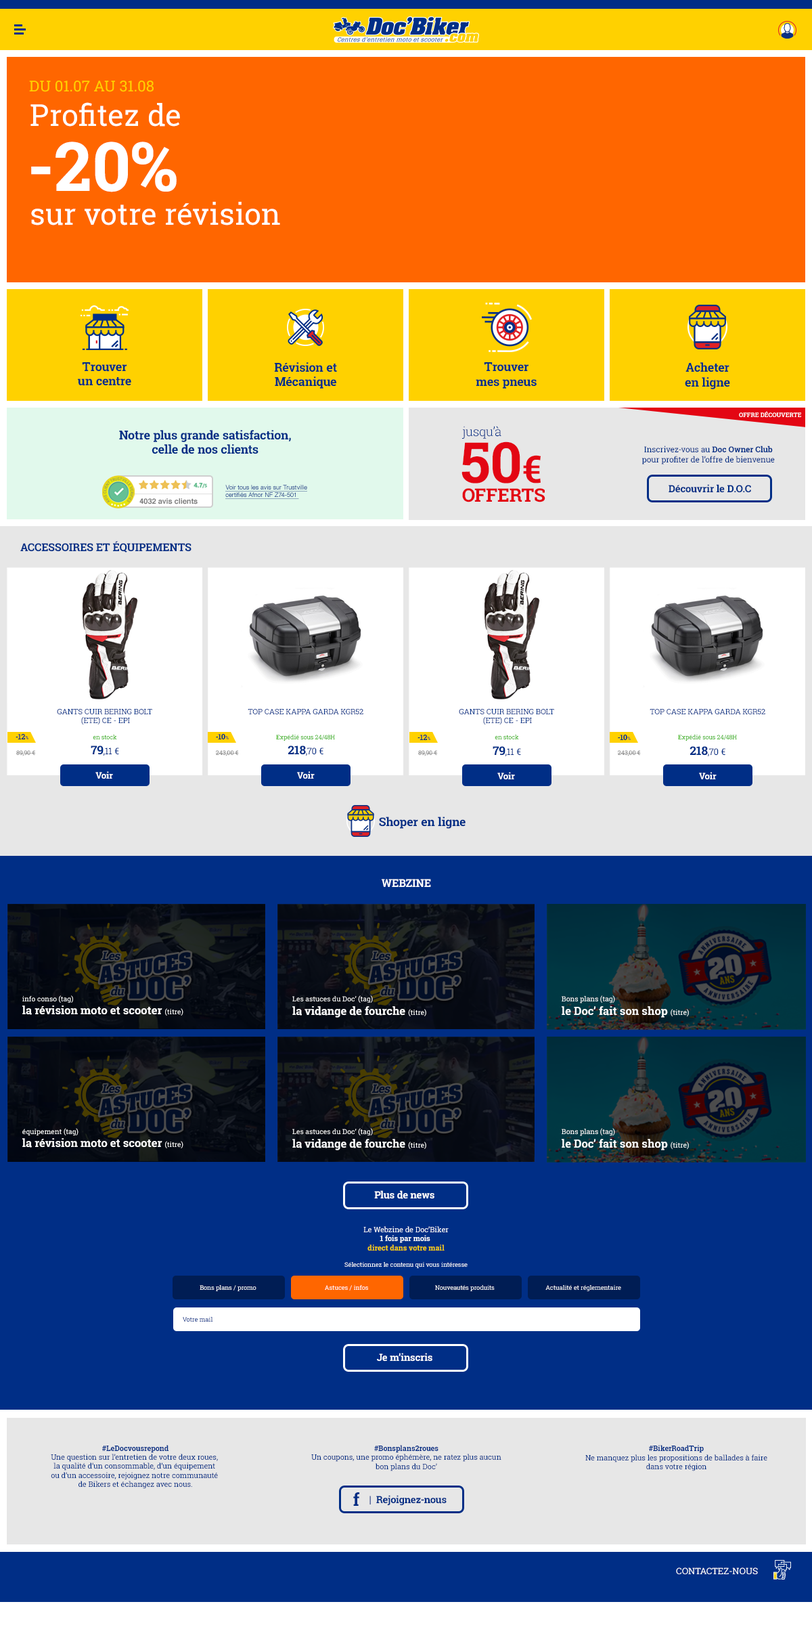
<style>
.page{position:relative;width:812px;height:1625px}
.page>*{position:absolute;margin:0}
.t1{font:15.1px "RobotoSlab-Regular";color:#ffd100}
.t2{font:30.2px "RobotoSlab-Regular";color:#ffffff}
.t3{font:67.9px "RobotoSlab-Bold";color:#ffffff}
.t4{font:12.2px "RobotoSlab-Bold";color:#002e86}
.t5{font:6.1px "RobotoSlab-Bold";color:#ffffff;text-transform:uppercase}
.t6{font:12.6px "RobotoSlab-Light";color:#002e86}
.t7{font:56.6px "RobotoSlab-Bold";color:#e30613}
.t8{font:37.7px "RobotoSlab-Bold";color:#e30613}
.t9{font:8.1px "RobotoSlab-Regular";color:#002e86}
.t10{font:8.1px "RobotoSlab-Bold";color:#002e86}
.t11{font:6.2px "Helvetica";text-decoration:underline}
.t12{font:9.9px "RobotoSlab-Bold";color:#002e86}
.t13{font:18.9px "RobotoSlab-Bold";color:#e30613;text-transform:uppercase}
.t14{font:7.5px "Helvetica-Bold";color:#7a7a7a}
.t15{font:10.8px "RobotoSlab-Bold";color:#002e86;text-transform:uppercase}
.t16{font:7.5px "RobotoSlab-Regular";color:#002e86}
.t17{font:7.5px "RobotoSlab-Bold";color:#002e86}
.t18{font:4.5px "RobotoSlab-Bold";color:#002e86}
.t19{font:6px "RobotoSlab-Regular";color:#28ac00}
.t20{font:9px "RobotoSlab-Regular";color:#002e86}
.t21{font:12.1px "RobotoSlab-Bold";color:#002e86}
.t22{font:9.1px "RobotoSlab-Regular";color:#002e86}
.t23{font:6px "RobotoSlab-Regular";color:#767676}
.t24{font:9px "RobotoSlab-Bold";color:#fefefe}
.t25{font:10.8px "RobotoSlab-Bold";color:#ffffff;text-transform:uppercase}
.t26{font:11.2px "RobotoSlab-Bold";color:#ffffff}
.t27{font:7px "RobotoSlab-Regular";color:#ffffff}
.t28{font:11.2px "RobotoSlab-Regular";color:#ffffff}
.t29{font:10.1px "RobotoSlab-Bold";color:#ffffff}
.t30{font:6.2px "RobotoSlab-Regular";color:#ffffff}
.t31{font:7.5px "RobotoSlab-Regular";color:#ffffff}
.t32{font:7.5px "RobotoSlab-Bold";color:#ffffff}
.t33{font:7.5px "RobotoSlab-Bold";color:#fad000}
.t34{font:6.2px "RobotoSlab-Regular"}
.t35{font:10px "RobotoSlab-Bold";color:#ffffff}
.t36{font:10px "RobotoSlab-Bold";color:#002e86}
.t37{font:17.4px "RobotoSlab-Bold";color:#002e86}
.t38{font:9px "RobotoSlab-Regular";color:#ffffff;text-transform:uppercase}
</style>
<div class="page">
<p class="t1" style="left:29px;top:81px;width:125px;height:11px">DU 01.07 AU 31.08</p>
<p class="t2" style="left:30px;top:102px;width:150px;height:25px">Profitez de</p>
<p class="t3" style="left:31px;top:141px;width:146px;height:51px">-20%</p>
<p class="t2" style="left:31px;top:202px;width:249px;height:23px">sur votre révision</p>
<p class="t4" style="left:78px;top:362px;width:53px;height:24px;text-align:center">Trouver<br>un centre</p>
<p class="t4" style="left:274px;top:362px;width:63px;height:27px;text-align:center">Révision et<br>Mécanique</p>
<p class="t4" style="left:476px;top:362px;width:61px;height:27px;text-align:center">Trouver<br>mes pneus</p>
<p class="t4" style="left:685px;top:362px;width:45px;height:27px;text-align:center">Acheter<br>en ligne</p>
<p class="t5" style="left:739px;top:411px;width:63px;height:6px">Offre découverte</p>
<p class="t6" style="left:462px;top:426px;width:40px;height:13px">jusqu’à</p>
<p class="t4" style="left:119px;top:430px;width:172px;height:24px;text-align:center">Notre plus grande satisfaction,<br>celle de nos clients</p>
<p class="t7" style="left:462px;top:441px;width:79px;height:42px">50<span class="t8">€</span></p>
<p class="t9" style="left:642px;top:445px;width:133px;height:19px;text-align:center">Inscrivez-vous au <span class="t10">Doc Owner Club<br></span>pour profiter de l’offre de bienvenue</p>
<p class="t11" style="left:225px;top:485px;width:82px;height:14px">Voir tous les avis sur Trustville<br>certifiés Afnor NF Z74-501</p>
<p class="t12" style="left:669px;top:484px;width:82px;height:9px">Découvrir le D.O.C</p>
<p class="t13" style="left:462px;top:488px;width:84px;height:14px">offerts</p>
<p class="t14" style="left:139px;top:498px;width:59px;height:6px">4032 avis clients</p>
<p class="t15" style="left:20px;top:541px;width:172px;height:11px">Accessoires et équipements</p>
<p class="t16" style="left:57px;top:709px;width:95px;height:16px;text-align:center">GANTS CUIR BERING BOLT <br>(ETE) CE - EPI</p>
<p class="t16" style="left:248px;top:709px;width:116px;height:5px">TOP CASE KAPPA GARDA KGR52</p>
<p class="t16" style="left:459px;top:709px;width:95px;height:16px;text-align:center">GANTS CUIR BERING BOLT <br>(ETE) CE - EPI</p>
<p class="t16" style="left:650px;top:709px;width:116px;height:5px">TOP CASE KAPPA GARDA KGR52</p>
<p class="t17" style="left:16px;top:734px;width:12px;height:5px">-12<span class="t18">%</span></p>
<p class="t19" style="left:93px;top:734px;width:24px;height:5px">en stock</p>
<p class="t17" style="left:216px;top:734px;width:13px;height:5px">-10<span class="t18">%</span></p>
<p class="t19" style="left:276px;top:734px;width:59px;height:7px">Expédié sous 24/48H</p>
<p class="t17" style="left:418px;top:734px;width:13px;height:6px">-12<span class="t18">%</span></p>
<p class="t19" style="left:495px;top:734px;width:24px;height:5px">en stock</p>
<p class="t17" style="left:618px;top:734px;width:13px;height:6px">-10<span class="t18">%</span></p>
<p class="t19" style="left:678px;top:734px;width:59px;height:7px">Expédié sous 24/48H</p>
<p class="t20" style="left:91px;top:745px;width:28px;height:10px"><span class="t21">79</span>,11 €</p>
<p class="t20" style="left:288px;top:745px;width:36px;height:10px"><span class="t21">218</span>,70 €</p>
<p class="t22" style="left:493px;top:746px;width:28px;height:10px"><span class="t21">79</span>,11 €</p>
<p class="t22" style="left:690px;top:746px;width:36px;height:10px"><span class="t21">218</span>,70 €</p>
<p class="t23" style="left:16px;top:750px;width:20px;height:6px">89,90 €</p>
<p class="t23" style="left:215px;top:750px;width:24px;height:6px">243,00 €</p>
<p class="t23" style="left:418px;top:750px;width:20px;height:6px">89,90 €</p>
<p class="t23" style="left:617px;top:750px;width:24px;height:6px">243,00 €</p>
<p class="t24" style="left:95px;top:771px;width:18px;height:8px">Voir</p>
<p class="t24" style="left:297px;top:771px;width:18px;height:8px">Voir</p>
<p class="t24" style="left:498px;top:772px;width:17px;height:8px">Voir</p>
<p class="t24" style="left:699px;top:772px;width:18px;height:8px">Voir</p>
<p class="t21" style="left:379px;top:816px;width:87px;height:13px">Shoper en ligne</p>
<p class="t25" style="left:382px;top:879px;width:49px;height:8px">webzine</p>
<p class="t26" style="left:22px;top:995px;width:161px;height:20px"><span class="t27">info conso (tag)</span><span class="t28"> <br></span>la révision moto et scooter <span class="t27">(titre)</span></p>
<p class="t27" style="left:292px;top:995px;width:134px;height:22px">Les astuces du Doc’ (tag)<span class="t28"> <br></span><span class="t26">la vidange de fourche </span>(titre)</p>
<p class="t26" style="left:562px;top:995px;width:127px;height:22px"><span class="t27">Bons plans (tag)</span><span class="t28"> <br></span>le Doc’ fait son shop <span class="t27">(titre)</span></p>
<p class="t26" style="left:22px;top:1128px;width:161px;height:20px"><span class="t27">équipement (tag)</span><span class="t28"> <br></span>la révision moto et scooter <span class="t27">(titre)</span></p>
<p class="t27" style="left:292px;top:1128px;width:134px;height:22px">Les astuces du Doc’ (tag)<span class="t28"> <br></span><span class="t26">la vidange de fourche </span>(titre)</p>
<p class="t26" style="left:562px;top:1128px;width:127px;height:22px"><span class="t27">Bons plans (tag)</span><span class="t28"> <br></span>le Doc’ fait son shop <span class="t27">(titre)</span></p>
<p class="t29" style="left:374px;top:1190px;width:61px;height:9px">Plus de news</p>
<p class="t30" style="left:345px;top:1226px;width:123px;height:42px;text-align:center"><span class="t31">Le Webzine de Doc’Biker<br></span><span class="t32">1 fois par mois <br></span><span class="t33">direct dans votre mail<br><br></span>Sélectionnez le contenu qui vous intéresse</p>
<p class="t30" style="left:200px;top:1285px;width:57px;height:6px">Bons plans / promo</p>
<p class="t30" style="left:325px;top:1285px;width:43px;height:5px">Astuces / infos</p>
<p class="t30" style="left:435px;top:1285px;width:60px;height:6px">Nouveautés produits</p>
<p class="t30" style="left:546px;top:1285px;width:75px;height:6px">Actualité et réglementaire</p>
<p class="t34" style="left:183px;top:1317px;width:30px;height:4px">Votre mail</p>
<p class="t35" style="left:377px;top:1353px;width:56px;height:8px">Je m’inscris</p>
<p class="t16" style="left:51px;top:1445px;width:167px;height:44px;text-align:center"><span class="t17">#LeDocvousrepond</span><br>Une question sur l’entretien de votre deux roues, <br>la qualité d’un consommable, d’un équipement <br>ou d’un accessoire, rejoignez notre communauté <br>de Bikers et échangez avec nous.</p>
<p class="t16" style="left:311px;top:1445px;width:191px;height:26px;text-align:center"><span class="t17">#Bonsplans2roues<br></span>Un coupons, une promo éphémère, ne ratez plus aucun<br>bon plans du Doc’</p>
<p class="t16" style="left:586px;top:1445px;width:182px;height:26px;text-align:center"><span class="t17">#BikerRoadTrip<br></span>Ne manquez plus les propositions de ballades à faire<br>dans votre région</p>
<p class="t36" style="left:353px;top:1492px;width:94px;height:14px"><span class="t37">f</span>    |  Rejoignez-nous</p>
<p class="t38" style="left:676px;top:1567px;width:82px;height:7px">contactez-nous</p>
</div>
